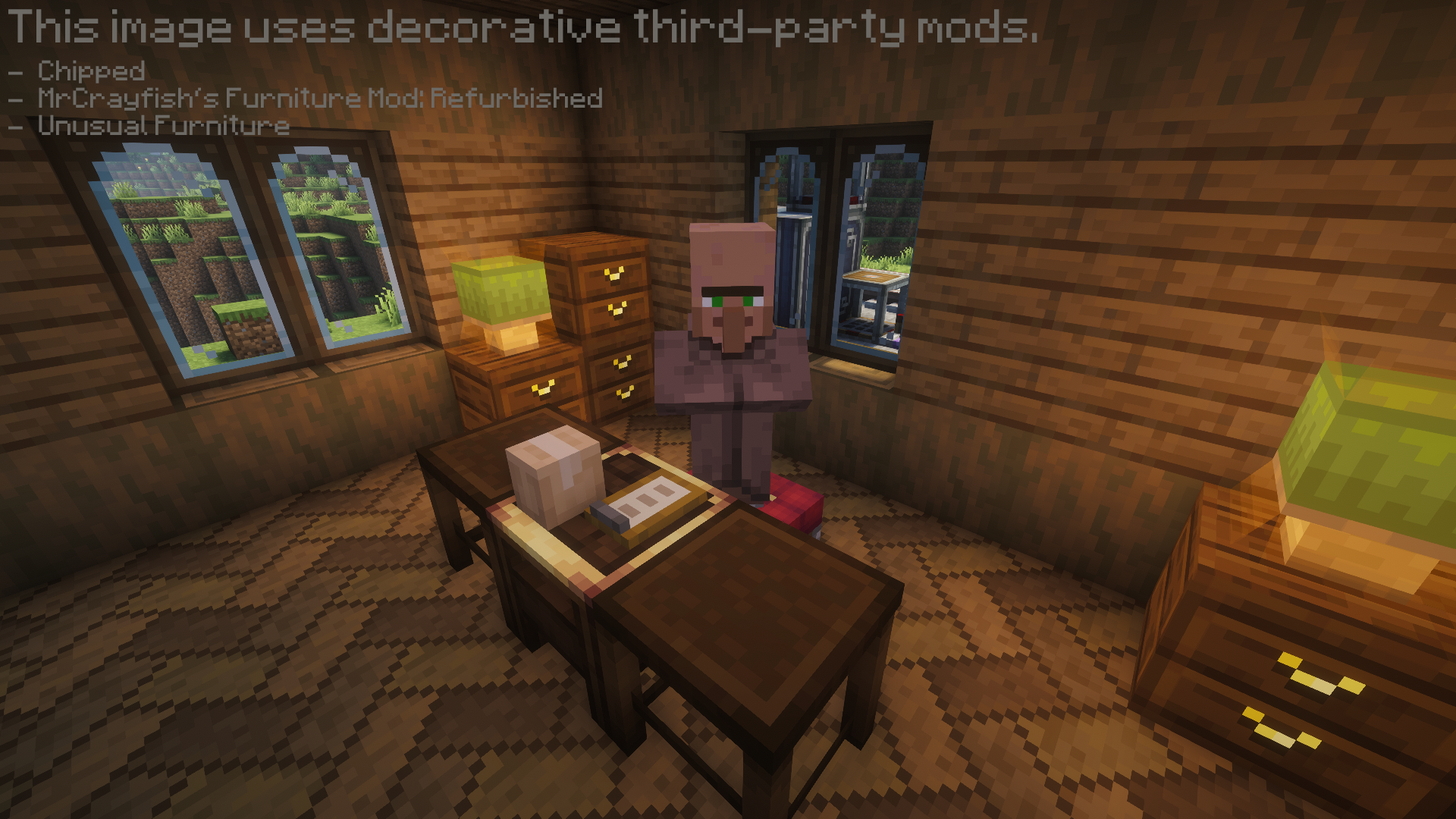
<style>
.page{position:relative;width:1456px;height:819px}
.page>*{position:absolute;margin:0}
.t1{font:37.9px "Minecraft";color:#6d6a65}
.t2{font:22.7px "Minecraft";color:#6d6a65}
</style>
<div class="page">
<p class="t1" style="left:8px;top:9px;width:1029px;height:39px">This image uses decorative third-party mods.</p>
<p class="t2" style="left:8px;top:60px;width:594px;height:75px">Chipped<br>MrCrayfish‘s Furniture Mod: Refurbished<br>Unusual Furniture</p>
</div>
